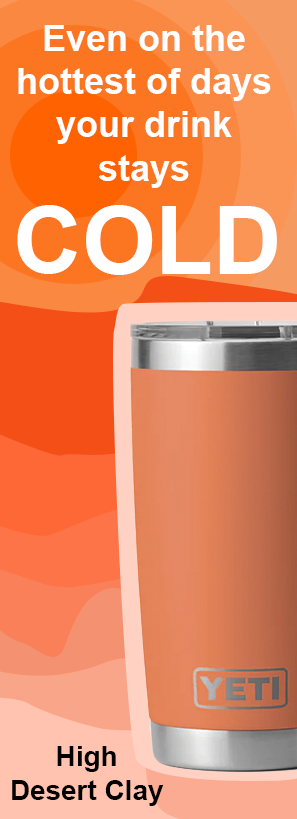
<style>
.page{position:relative;width:297px;height:819px}
.page>*{position:absolute;margin:0}
.t1{font:36px "Arial-BoldMT";color:#ffffff}
.t2{font:94.8px "Arial-BoldMT";color:#ffffff}
.t3{font:27.9px "Arial-BoldMT";color:#000000}
</style>
<div class="page">
<p class="t1" style="left:18px;top:25px;width:253px;height:163px;text-align:center">Even on the hottest of days your drink<br>stays</p>
<p class="t2" style="left:17px;top:205px;width:260px;height:70px">COLD</p>
<p class="t3" style="left:12px;top:746px;width:152px;height:60px;text-align:center">High <br>Desert Clay</p>
</div>
